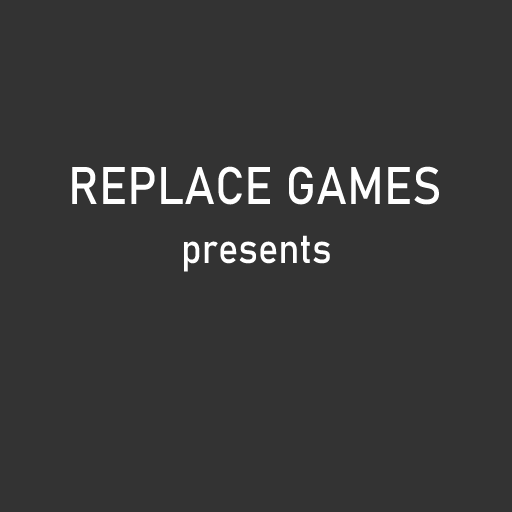
<style>
.page{position:relative;width:512px;height:512px;background:#333333}
.page>*{position:absolute;margin:0}
.t1{font:52px "Bahnschrift";color:#ffffff;scale:0.91 1}
.t2{font:41.6px "Bahnschrift";color:#ffffff;scale:0.91 1}
</style>
<div class="page">
<p class="t1" style="left:72px;top:166px;width:367px;height:39px">REPLACE GAMES</p>
<p class="t2" style="left:184px;top:235px;width:146px;height:37px">presents</p>
</div>
